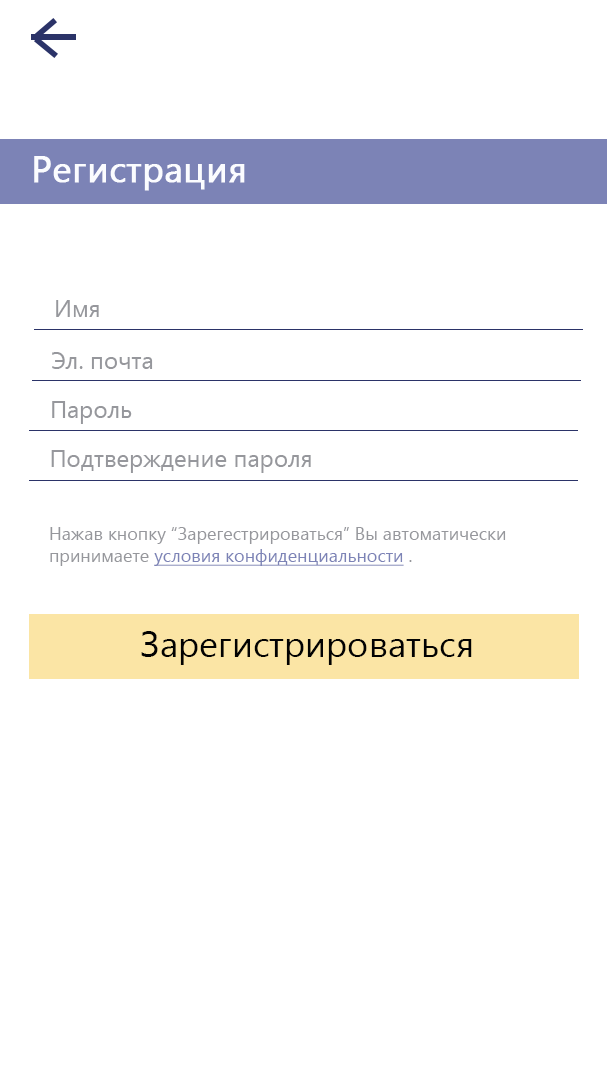
<style>
.page{position:relative;width:607px;height:1080px;background:#ffffff}
.page>*{position:absolute;margin:0}
.t1{font:36px "YuGothicUI-Regular";color:#fbfcff;font-weight:bold}
.t2{font:24px "YuGothicUI-Regular";color:#96979c}
.t3{font:18px "YuGothicUI-Regular";color:#96979c}
.t4{font:18px "YuGothicUI-Regular";color:#7c83b6;text-decoration:underline}
.t5{font:36px "YuGothicUI-Regular";color:#020202}
</style>
<div class="page">
<p class="t1" style="left:34px;top:156px;width:211px;height:35px">Регистрация</p>
<p class="t2" style="left:56px;top:300px;width:43px;height:17px">Имя</p>
<p class="t2" style="left:52px;top:352px;width:101px;height:17px">Эл. почта</p>
<p class="t2" style="left:52px;top:401px;width:80px;height:23px">Пароль</p>
<p class="t2" style="left:51px;top:450px;width:260px;height:23px">Подтверждение пароля</p>
<p class="t3" style="left:50px;top:527px;width:456px;height:39px">Нажав кнопку “Зарегестрироваться” Вы автоматически <br>принимаете <span class="t4">условия конфиденциальности</span> .</p>
<p class="t5" style="left:141px;top:631px;width:331px;height:34px">Зарегистрироваться</p>
</div>
